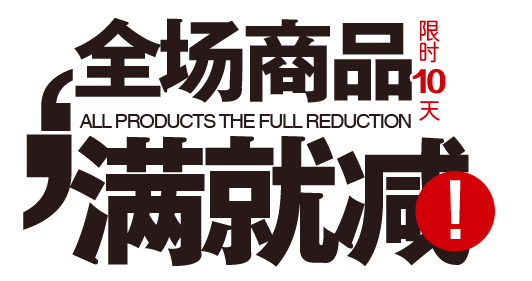
<style>
.page{position:relative;width:532px;height:281px;background:#ffffff}
.page>*{position:absolute;margin:0}
.t1{font:92.1px "FZYDCHJW--GB1-0";letter-spacing:-0.075em;color:#281818}
.t2{font:23.1px/25.3px "CTZhongYuanSJ";letter-spacing:-0.075em;color:#d30007;text-transform:uppercase}
.t3{font:150.6px "FZZDHJW--GB1-0";letter-spacing:-0.075em;color:#281818}
.t4{font:28px "FZZDHJW--GB1-0";letter-spacing:-0.075em;color:#d30007;text-transform:uppercase}
.t5{font:20px "CTZhongYuanSJ";letter-spacing:-0.075em;color:#281818;text-transform:uppercase}
.t6{font:231.8px "FZZDHJW--GB1-0";letter-spacing:-0.075em;color:#281818}
.t7{font:142.7px "FZYDCHJW--GB1-0";letter-spacing:-0.075em;color:#281818}
.t8{font:70.5px "FZYDCHJW--GB1-0";letter-spacing:-0.075em;color:#ffffff}
</style>
<div class="page">
<p class="t1" style="left:74px;top:17px;width:338px;height:86px">全场商品</p>
<p class="t2" style="left:419px;top:20px;width:21px;height:101px">限时        天</p>
<p class="t3" style="left:41px;top:69px;width:32px;height:62px;rotate:180deg">,</p>
<p class="t4" style="left:412px;top:69px;width:34px;height:25px">10</p>
<p class="t5" style="left:79px;top:114px;width:332px;height:14px">all products the full reduction</p>
<p class="t6" style="left:23px;top:134px;width:49px;height:96px">,</p>
<p class="t7" style="left:69px;top:135px;width:403px;height:132px">满就减</p>
<p class="t8" style="left:450px;top:180px;width:11px;height:59px">!</p>
</div>
